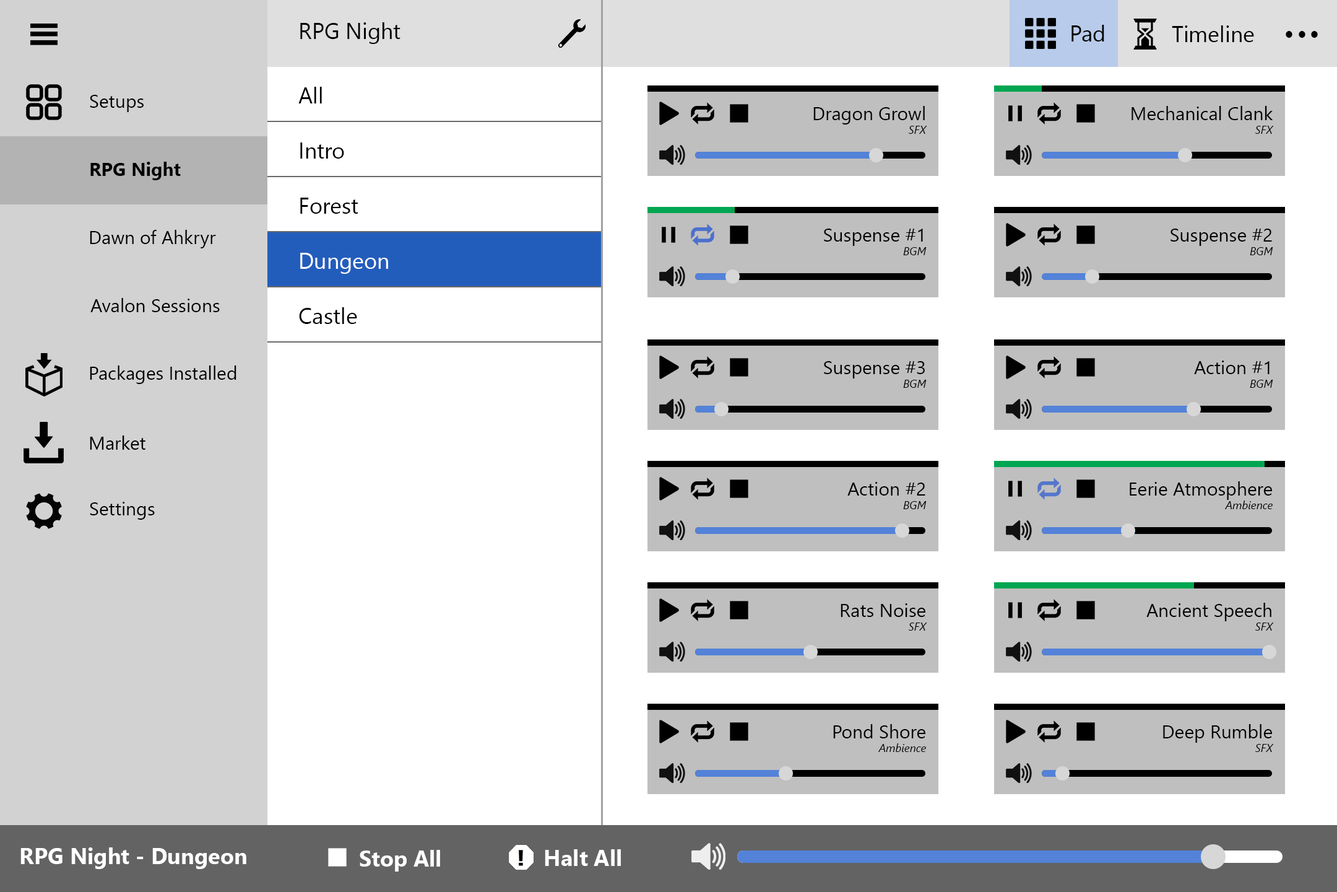
<style>
.page{position:relative;width:1337px;height:892px;background:#ffffff}
.page>*{position:absolute;margin:0}
.t1{font:22.3px "SegoeUI";color:#000000}
.t2{font:59.4px "SegoeUI";color:#000000}
.t3{font:18.6px "SegoeUI";color:#000000}
.t4{font:11.1px "SegoeUI-Italic";color:#000000}
.t5{font:18.6px "SegoeUI-Bold";color:#000000}
.t6{font:22.3px "SegoeUI";color:#ffffff}
.t7{font:22.3px "SegoeUI-Bold";color:#ffffff}
</style>
<div class="page">
<p class="t1" style="left:300px;top:22px;width:101px;height:22px">RPG Night</p>
<p class="t1" style="left:1072px;top:25px;width:33px;height:16px">Pad</p>
<p class="t1" style="left:1172px;top:25px;width:82px;height:17px">Timeline</p>
<p class="t2" style="left:1286px;top:31px;width:32px;height:7px">...</p>
<p class="t1" style="left:298px;top:87px;width:24px;height:16px">All</p>
<p class="t3" style="left:90px;top:95px;width:54px;height:17px">Setups</p>
<p class="t3" style="left:814px;top:106px;width:111px;height:18px">Dragon Growl</p>
<p class="t3" style="left:1132px;top:106px;width:142px;height:14px">Mechanical Clank</p>
<p class="t4" style="left:909px;top:126px;width:19px;height:8px">SFX</p>
<p class="t4" style="left:1256px;top:126px;width:18px;height:8px">SFX</p>
<p class="t1" style="left:300px;top:142px;width:44px;height:17px">Intro</p>
<p class="t5" style="left:90px;top:162px;width:91px;height:18px">RPG Night</p>
<p class="t1" style="left:300px;top:198px;width:58px;height:16px">Forest</p>
<p class="t3" style="left:90px;top:230px;width:126px;height:18px">Dawn of Ahkryr</p>
<p class="t3" style="left:824px;top:228px;width:99px;height:18px">Suspense #1</p>
<p class="t3" style="left:1171px;top:228px;width:101px;height:18px">Suspense #2</p>
<p class="t6" style="left:300px;top:253px;width:88px;height:21px">Dungeon</p>
<p class="t4" style="left:903px;top:247px;width:24px;height:8px">BGM</p>
<p class="t4" style="left:1250px;top:247px;width:24px;height:8px">BGM</p>
<p class="t3" style="left:90px;top:298px;width:130px;height:14px">Avalon Sessions</p>
<p class="t1" style="left:299px;top:307px;width:58px;height:17px">Castle</p>
<p class="t3" style="left:90px;top:365px;width:147px;height:19px">Packages Installed</p>
<p class="t3" style="left:824px;top:361px;width:101px;height:17px">Suspense #3</p>
<p class="t3" style="left:1194px;top:360px;width:76px;height:14px">Action #1</p>
<p class="t4" style="left:903px;top:380px;width:24px;height:8px">BGM</p>
<p class="t4" style="left:1250px;top:380px;width:24px;height:8px">BGM</p>
<p class="t3" style="left:90px;top:435px;width:56px;height:15px">Market</p>
<p class="t3" style="left:848px;top:482px;width:78px;height:13px">Action #2</p>
<p class="t3" style="left:1130px;top:481px;width:142px;height:19px">Eerie Atmosphere</p>
<p class="t3" style="left:90px;top:502px;width:65px;height:17px">Settings</p>
<p class="t4" style="left:903px;top:501px;width:24px;height:8px">BGM</p>
<p class="t4" style="left:1225px;top:500px;width:48px;height:9px">Ambience</p>
<p class="t3" style="left:841px;top:603px;width:85px;height:14px">Rats Noise</p>
<p class="t3" style="left:1147px;top:602px;width:125px;height:19px">Ancient Speech</p>
<p class="t4" style="left:909px;top:622px;width:19px;height:8px">SFX</p>
<p class="t4" style="left:1256px;top:622px;width:18px;height:8px">SFX</p>
<p class="t3" style="left:833px;top:724px;width:93px;height:14px">Pond Shore</p>
<p class="t3" style="left:1163px;top:724px;width:109px;height:18px">Deep Rumble</p>
<p class="t4" style="left:879px;top:743px;width:47px;height:9px">Ambience</p>
<p class="t4" style="left:1256px;top:744px;width:18px;height:8px">SFX</p>
<p class="t7" style="left:20px;top:847px;width:226px;height:22px">RPG Night - Dungeon</p>
<p class="t7" style="left:360px;top:849px;width:80px;height:22px">Stop All</p>
<p class="t7" style="left:545px;top:849px;width:76px;height:17px">Halt All</p>
</div>
